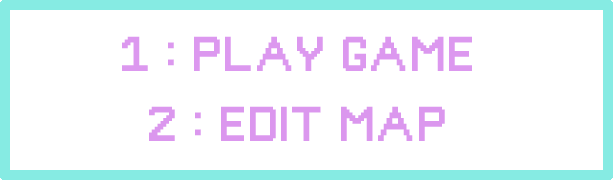
<style>
.page{position:relative;width:613px;height:180px;background:#ffffff}
.page>*{position:absolute;margin:0}
.t1{font:45.8px "PixelGameFont";color:#dc98ef}
.t2{font:45.8px "PixelGameFont";color:#db97ee}
</style>
<div class="page">
<p class="t1" style="left:122px;top:36px;width:350px;height:35px">1 : PLAY GAME</p>
<p class="t2" style="left:149px;top:106px;width:296px;height:35px">2 : EDIT MAP</p>
</div>
